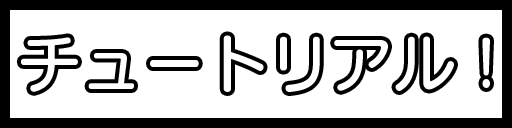
<style>
.page{position:relative;width:512px;height:128px;background:#ffffff}
.page>*{position:absolute;margin:0}
.t1{font:62.5px "SeuratProN-DB";color:#ffffff}
</style>
<div class="page">
<p class="t1" style="left:20px;top:35px;width:470px;height:57px">チュートリアル！</p>
</div>
